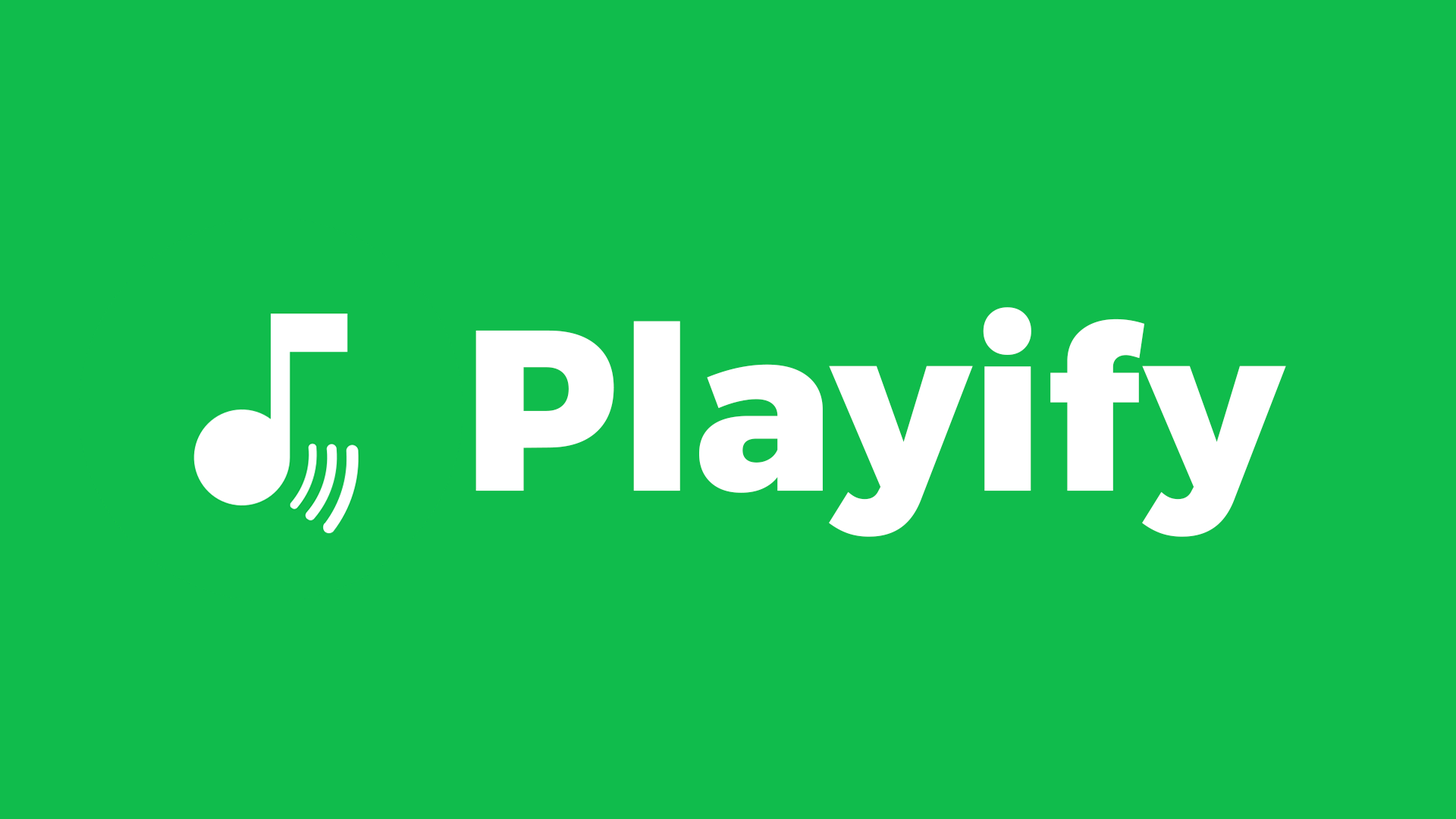
<style>
.page{position:relative;width:1456px;height:819px;background:#10bc4c}
.page>*{position:absolute;margin:0}
.t1{font:228.3px "Montserrat-ExtraBold";color:#ffffff}
</style>
<div class="page">
<p class="t1" style="left:475px;top:307px;width:811px;height:230px">Playify</p>
</div>
